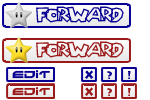
<style>
.page{position:relative;width:150px;height:100px;background:#ffffff}
.page>*{position:absolute;margin:0}
.t1{font:18px "Chlorinap-Regular";letter-spacing:-0.05em;color:#070093;text-transform:uppercase}
.t2{font:18px "Chlorinap-Regular";letter-spacing:-0.05em;color:#9a1a1b;text-transform:uppercase}
.t3{font:12px "Battlefield";letter-spacing:-0.01em;color:#070093;text-transform:uppercase}
.t4{font:11px "LithosPro-Black";letter-spacing:-0.01em;color:#070093;text-transform:uppercase}
.t5{font:12px "Battlefield";letter-spacing:-0.01em;color:#9a1a1b;text-transform:uppercase}
.t6{font:11px "LithosPro-Black";letter-spacing:-0.01em;color:#9a1a1b;text-transform:uppercase}
</style>
<div class="page">
<p class="t1" style="left:36px;top:6px;width:88px;height:17px">forward</p>
<p class="t2" style="left:36px;top:41px;width:88px;height:17px">forward</p>
<p class="t3" style="left:12px;top:70px;width:38px;height:9px">EDIT</p>
<p class="t4" style="left:85px;top:70px;width:9px;height:9px">X</p>
<p class="t4" style="left:107px;top:71px;width:5px;height:8px">?</p>
<p class="t4" style="left:128px;top:71px;width:3px;height:8px">!</p>
<p class="t5" style="left:12px;top:87px;width:38px;height:9px">EDIT</p>
<p class="t6" style="left:85px;top:87px;width:9px;height:9px">x</p>
<p class="t6" style="left:107px;top:88px;width:5px;height:8px">?</p>
<p class="t6" style="left:128px;top:88px;width:3px;height:8px">!</p>
</div>
